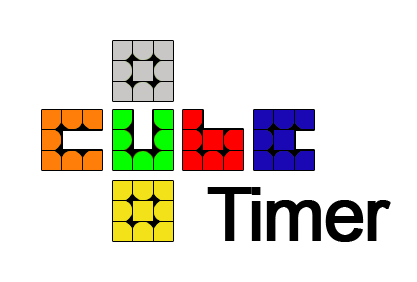
<style>
.page{position:relative;width:417px;height:282px;background:#ffffff}
.page>*{position:absolute;margin:0}
.t1{font:74.1px "ArialMT";letter-spacing:-0.044em;color:#000000;font-weight:bold}
</style>
<div class="page">
<p class="t1" style="left:207px;top:187px;width:184px;height:55px">Timer</p>
</div>
